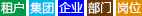
<style>
.page{position:relative;width:142px;height:16px}
.page>*{position:absolute;margin:0}
.t1{font:12px "MicrosoftYaHei";color:#ffffff}
</style>
<div class="page">
<p class="t1" style="left:1px;top:2px;width:23px;height:12px">租户</p>
<p class="t1" style="left:30px;top:2px;width:24px;height:12px">集团</p>
<p class="t1" style="left:59px;top:2px;width:24px;height:11px">企业</p>
<p class="t1" style="left:88px;top:2px;width:23px;height:12px">部门</p>
<p class="t1" style="left:118px;top:2px;width:23px;height:12px">岗位</p>
</div>
